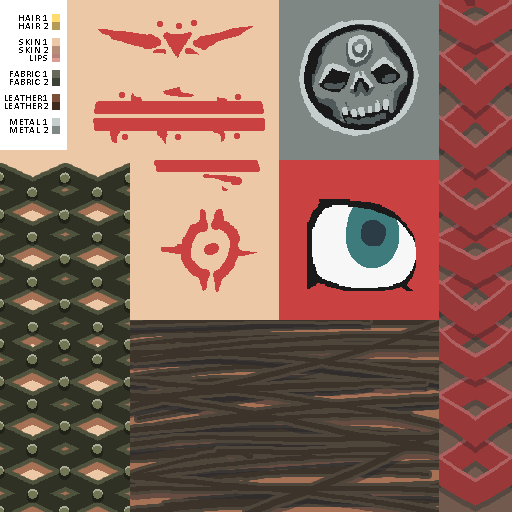
<style>
.page{position:relative;width:512px;height:512px;background:#edc8a7}
.page>*{position:absolute;margin:0}
.t1{font:10px/8px "Calibri";letter-spacing:0.05em;color:#000000}
</style>
<div class="page">
<p class="t1" style="left:5px;top:15px;width:43px;height:118px;text-align:right">HAIR 1<br>HAIR 2<br><br>SKIN 1<br>SKIN 2<br>LIPS<br><br>FABRIC 1<br>FABRIC 2<br><br>LEATHER1<br>LEATHER2<br><br>METAL 1<br>METAL 2</p>
</div>
